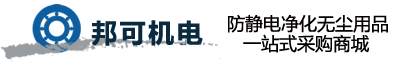
<style>
.page{position:relative;width:405px;height:65px;background:#ffffff}
.page>*{position:absolute;margin:0}
.t1{font:18px "MicrosoftYaHei";color:#040000}
.t2{font:26px "MicrosoftYaHei-Bold";letter-spacing:0.1em;color:#0b2a40}
</style>
<div class="page">
<p class="t1" style="left:228px;top:14px;width:160px;height:19px">防静电净化无尘用品</p>
<p class="t2" style="left:91px;top:20px;width:112px;height:26px">邦可机电</p>
<p class="t1" style="left:243px;top:34px;width:126px;height:19px">一站式采购商城</p>
</div>
